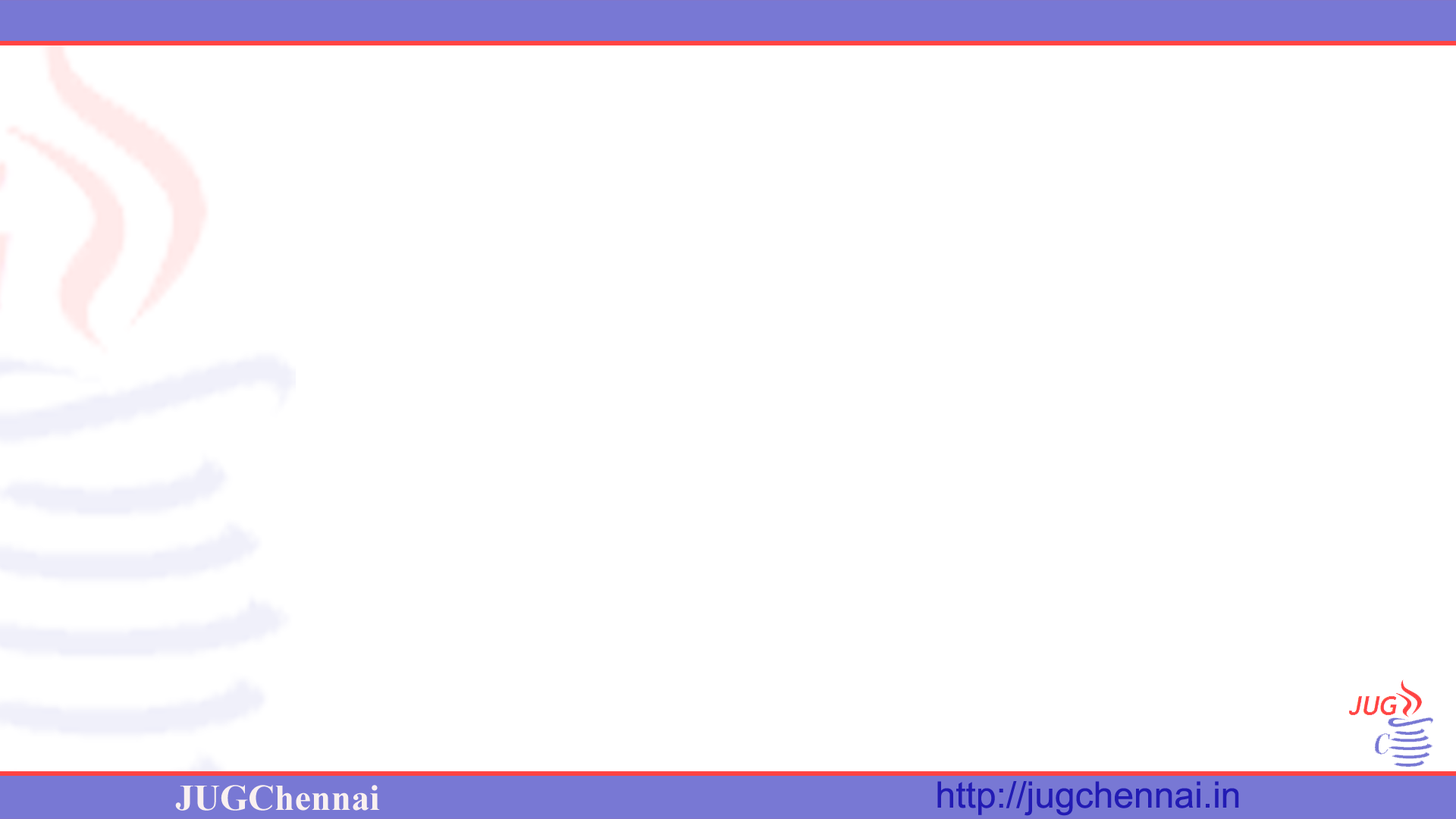
<style>
.page{position:relative;width:1456px;height:819px;background:#ffffff}
.page>*{position:absolute;margin:0}
.t1{font:36.4px "TimesNewRomanPS-BoldMT";color:#f9f0f0}
.t2{font:36.4px "ArialMT";color:#221bb4}
</style>
<div class="page">
<p class="t1" style="left:175px;top:785px;width:205px;height:26px">JUGChennai</p>
<p class="t2" style="left:937px;top:781px;width:302px;height:35px">http://jugchennai.in</p>
</div>
